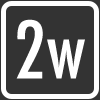
<style>
.page{position:relative;width:100px;height:100px;background:#333333}
.page>*{position:absolute;margin:0}
.t1{font:77px "Futura-CondensedMedium";letter-spacing:0.01em;color:#ffffff}
</style>
<div class="page">
<p class="t1" style="left:16px;top:19px;width:69px;height:60px">2w</p>
</div>
